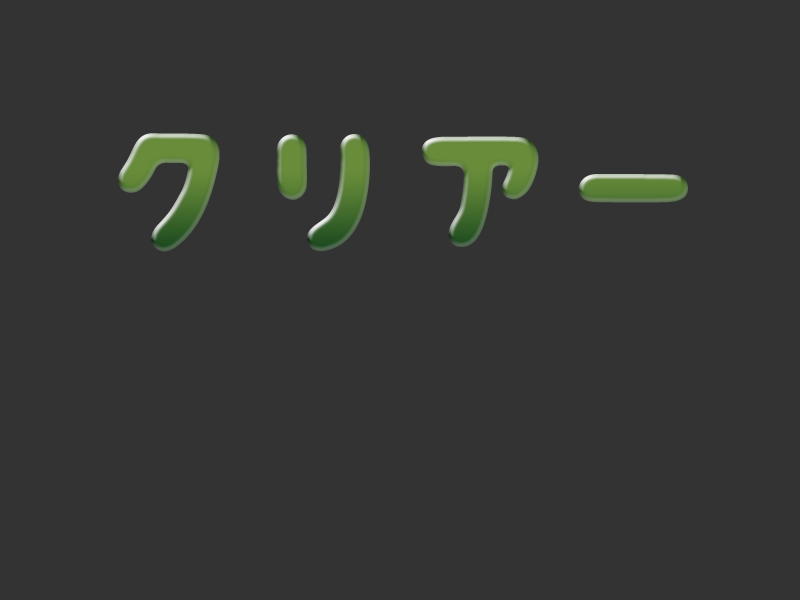
<style>
.page{position:relative;width:800px;height:600px;background:#333333}
.page>*{position:absolute;margin:0}
.t1{font:150px "mini-wakuwaku-maru";font-weight:bold}
</style>
<div class="page">
<p class="t1" style="left:118px;top:133px;width:570px;height:119px">クリアー</p>
</div>
